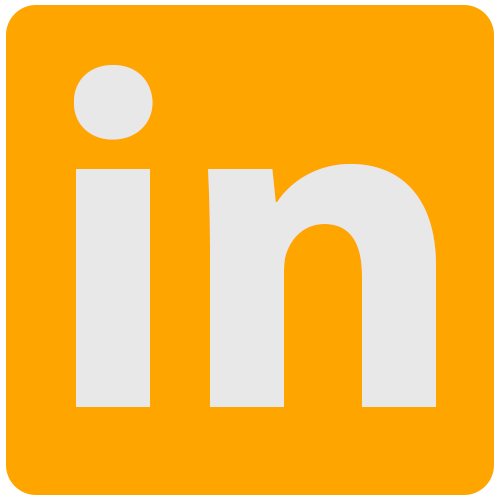
<style>
.page{position:relative;width:500px;height:500px;background:#ffa500}
.page>*{position:absolute;margin:0}
.t1{font:487.5px "MyriadPro-Bold";color:#e8e8e8}
</style>
<div class="page">
<p class="t1" style="left:74px;top:65px;width:362px;height:342px">in</p>
</div>
